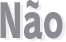
<style>
.page{position:relative;width:66px;height:42px;background:#8c8b93}
.page>*{position:absolute;margin:0}
.t1{font:45.9px "RodinPro-EB";letter-spacing:0.018em;color:#8c8b93;scale:0.69 1}
</style>
<div class="page">
<p class="t1" style="left:0px;top:0px;width:63px;height:39px">Não</p>
</div>
